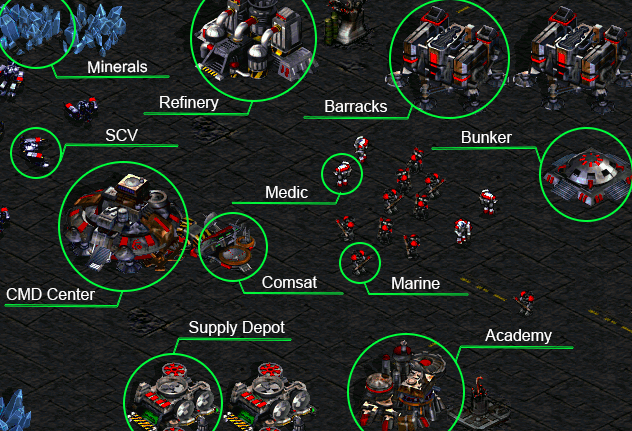
<style>
.page{position:relative;width:632px;height:431px}
.page>*{position:absolute;margin:0}
.t1{font:16px "ArialMT";color:#ffffff}
</style>
<div class="page">
<p class="t1" style="left:88px;top:60px;width:60px;height:14px">Minerals</p>
<p class="t1" style="left:160px;top:96px;width:59px;height:15px">Refinery</p>
<p class="t1" style="left:325px;top:100px;width:62px;height:12px">Barracks</p>
<p class="t1" style="left:106px;top:129px;width:32px;height:12px">SCV</p>
<p class="t1" style="left:462px;top:131px;width:50px;height:12px">Bunker</p>
<p class="t1" style="left:266px;top:186px;width:42px;height:12px">Medic</p>
<p class="t1" style="left:262px;top:276px;width:55px;height:12px">Comsat</p>
<p class="t1" style="left:392px;top:277px;width:48px;height:12px">Marine</p>
<p class="t1" style="left:6px;top:288px;width:89px;height:12px">CMD Center</p>
<p class="t1" style="left:189px;top:321px;width:96px;height:15px">Supply Depot</p>
<p class="t1" style="left:485px;top:329px;width:67px;height:15px">Academy</p>
</div>
